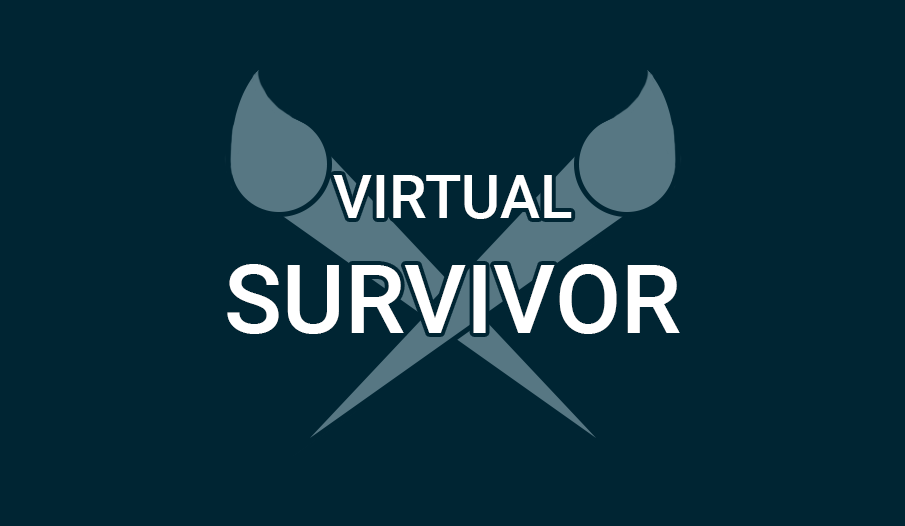
<style>
.page{position:relative;width:905px;height:526px;background:#002533}
.page>*{position:absolute;margin:0}
.t1{font:96px "Roboto-Medium";color:#ffffff}
.t2{font:60px "Roboto-Medium";color:#ffffff}
</style>
<div class="page">
<p class="t1" style="left:227px;top:175px;width:453px;height:159px;text-align:center"><span class="t2">VIRTUAL<br></span>SURVIVOR</p>
</div>
